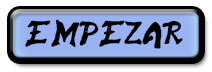
<style>
.page{position:relative;width:212px;height:72px;background:#000000}
.page>*{position:absolute;margin:0}
.t1{font:36px "FantasyColombianOdyssey-ByAntagony";color:#000000}
</style>
<div class="page">
<p class="t1" style="left:25px;top:19px;width:158px;height:30px">EMPEZAR</p>
</div>
